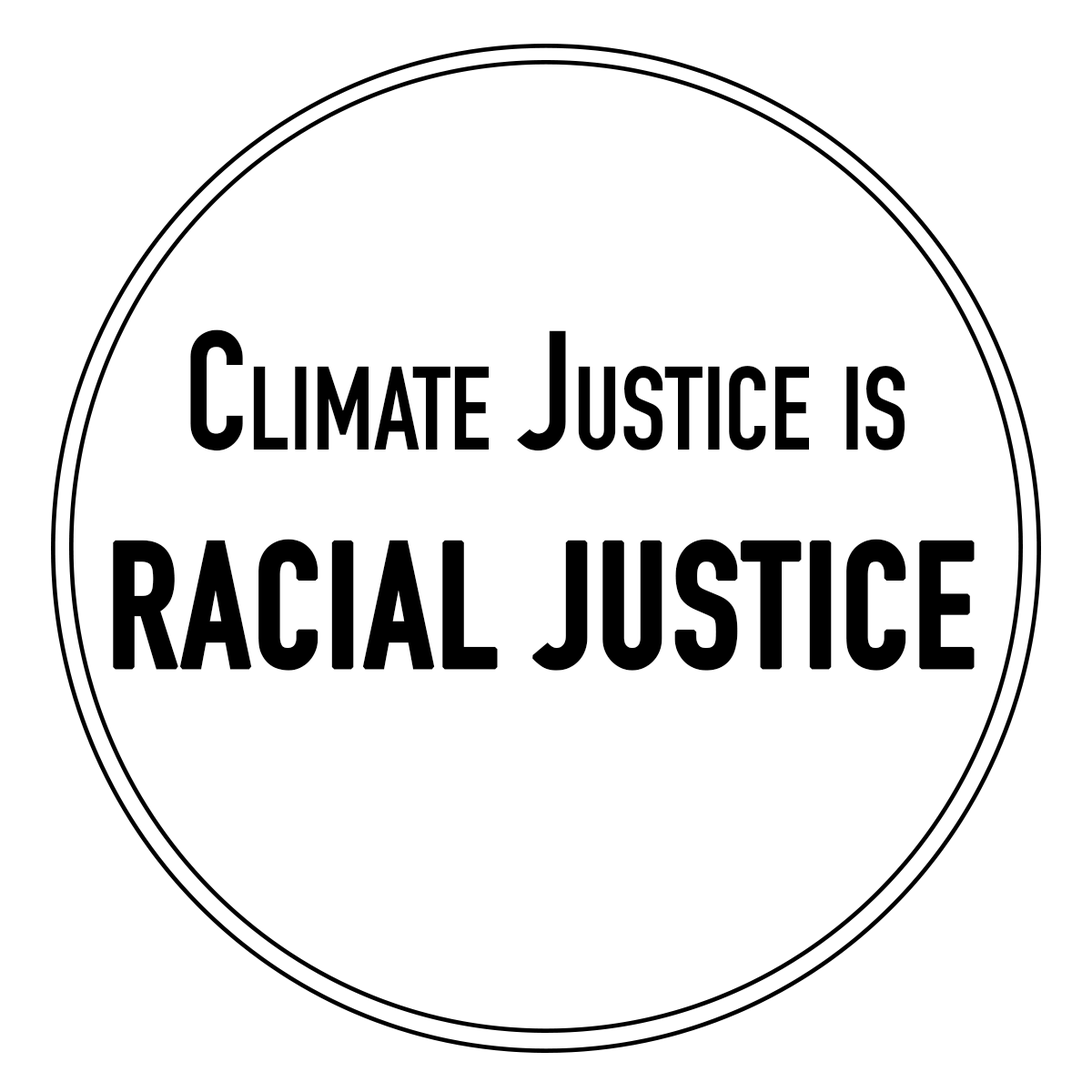
<style>
.page{position:relative;width:1092px;height:1092px;background:#ffffff}
.page>*{position:absolute;margin:0}
.t1{font:166.8px "DINCondensed-Bold";color:#000000;font-variant:small-caps;scale:0.95 1}
.t2{font:174.4px "DINCondensed-Bold";color:#000000;text-transform:uppercase;font-weight:bold;scale:0.95 1}
</style>
<div class="page">
<p class="t1" style="left:190px;top:329px;width:715px;height:122px">Climate Justice is</p>
<p class="t2" style="left:113px;top:539px;width:862px;height:132px">Racial Justice</p>
</div>
